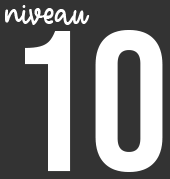
<style>
.page{position:relative;width:170px;height:179px;background:#333333}
.page>*{position:absolute;margin:0}
.t1{font:36px "SparklingDemo";color:#ffffff}
.t2{font:200px "BebasNeue-Regular";color:#ffffff}
</style>
<div class="page">
<p class="t1" style="left:5px;top:5px;width:85px;height:20px">niveau</p>
<p class="t2" style="left:25px;top:30px;width:138px;height:142px">10</p>
</div>
